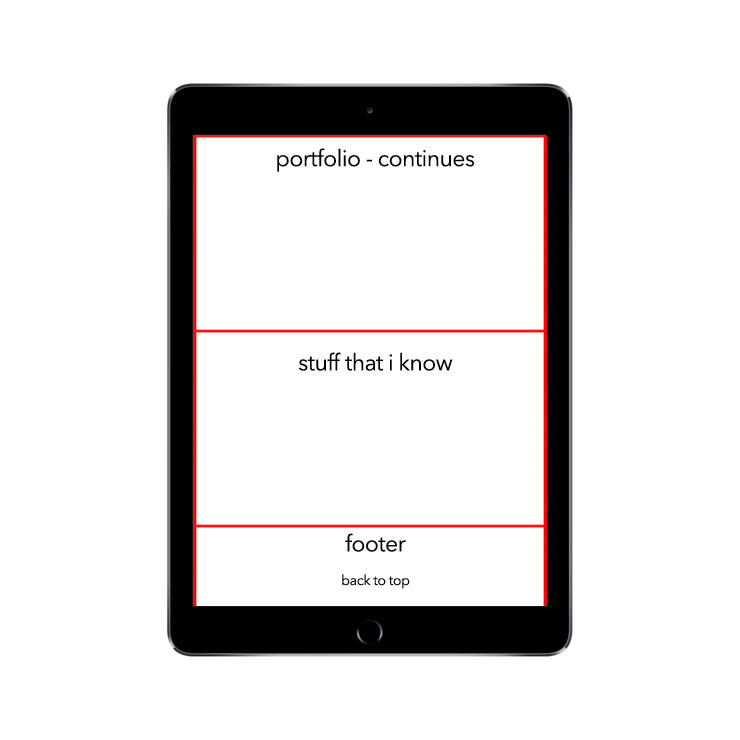
<style>
.page{position:relative;width:740px;height:740px;background:#ffffff}
.page>*{position:absolute;margin:0}
.t1{font:23px "AvenirNext-Regular";letter-spacing:-0.025em;color:#000000}
.t2{font:14px "AvenirNext-Regular";letter-spacing:-0.025em;color:#000000}
</style>
<div class="page">
<p class="t1" style="left:277px;top:148px;width:198px;height:24px">portfolio - continues</p>
<p class="t1" style="left:298px;top:352px;width:155px;height:19px">stuff that i know</p>
<p class="t2" style="left:342px;top:533px;width:68px;height:56px;text-align:center"><span class="t1">footer<br></span><br>back to top</p>
</div>
